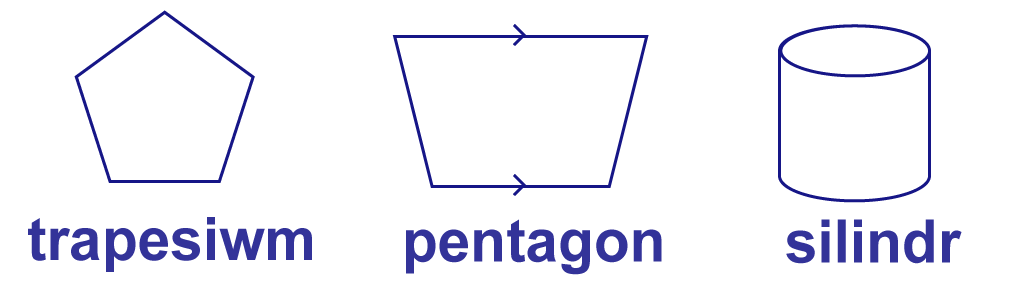
<style>
.page{position:relative;width:1024px;height:288px;background:#ffffff}
.page>*{position:absolute;margin:0}
.t1{font:60px "Arial-BoldMT";color:#333399}
</style>
<div class="page">
<p class="t1" style="left:28px;top:217px;width:284px;height:55px">trapesiwm</p>
<p class="t1" style="left:406px;top:219px;width:256px;height:56px">pentagon</p>
<p class="t1" style="left:786px;top:219px;width:176px;height:45px">silindr</p>
</div>
